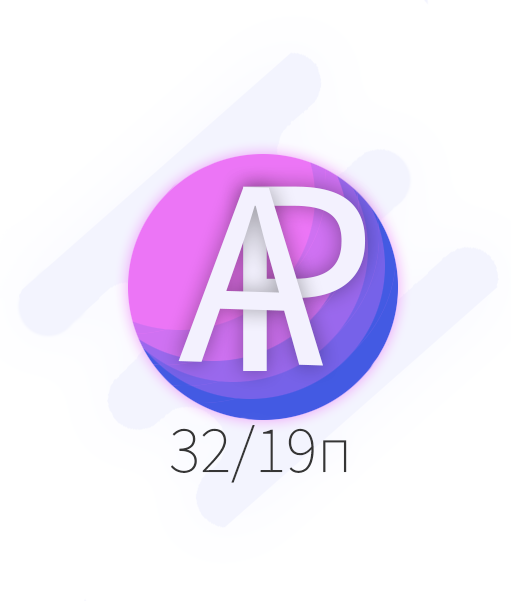
<style>
.page{position:relative;width:511px;height:601px;background:#ffffff}
.page>*{position:absolute;margin:0}
.t1{font:268.1px "SourceSansRoman-Regular";color:#f3f1fe}
.t2{font:280.9px "SourceSansRoman-Regular";color:#f3f1fe}
.t3{font:66px "SourceSansVariable-Roman";color:#353535}
</style>
<div class="page">
<p class="t1" style="left:178px;top:186px;width:145px;height:180px;rotate:2deg">А</p>
<p class="t2" style="left:243px;top:186px;width:123px;height:185px">Р</p>
<p class="t3" style="left:171px;top:425px;width:176px;height:58px">32/19п</p>
</div>
